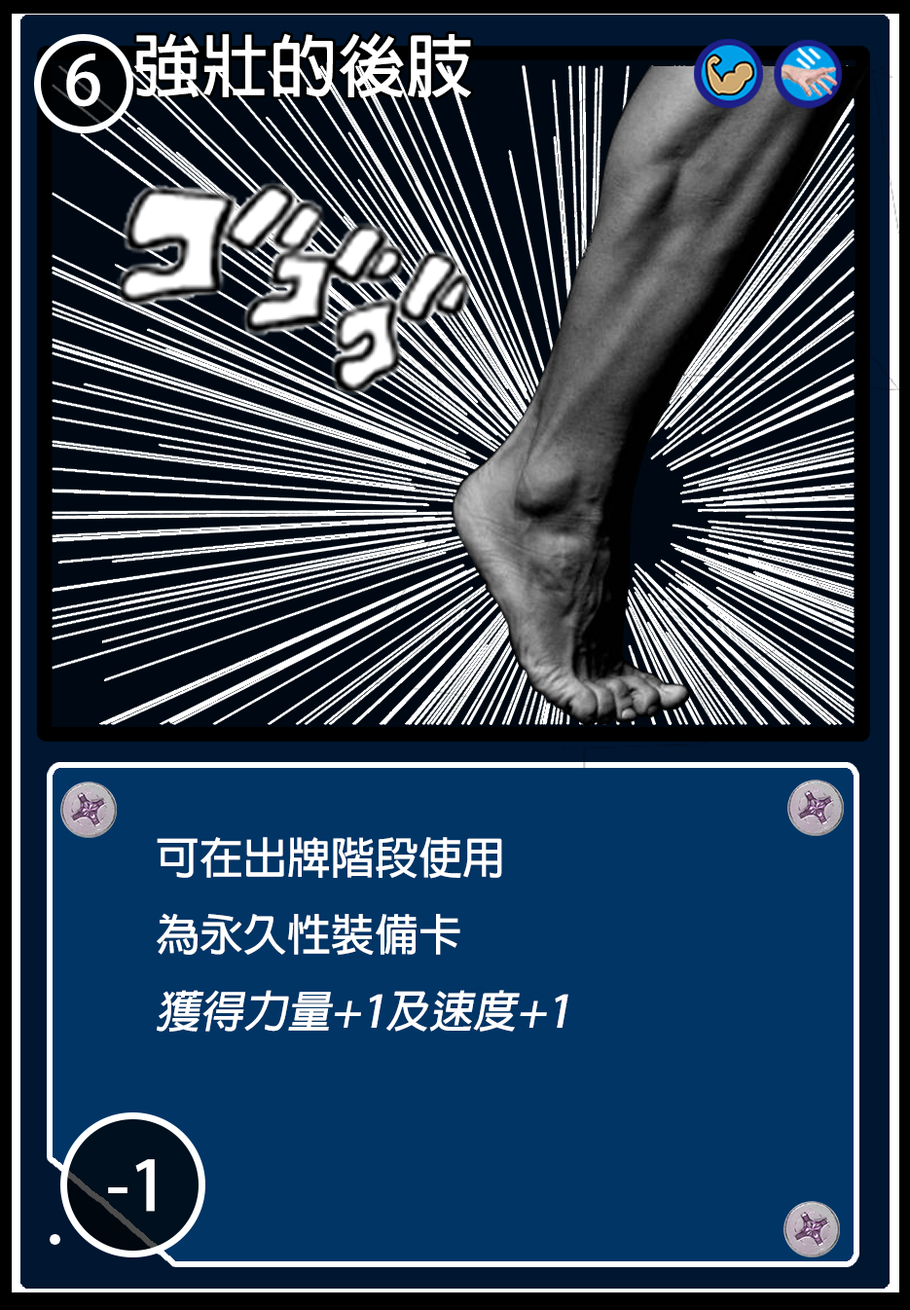
<style>
.page{position:relative;width:910px;height:1310px;background:#003566}
.page>*{position:absolute;margin:0}
.t1{font:68.1px "AdobeFanHeitiStd-Bold";color:#ffffff}
.t2{font:67.8px "AdobeFanHeitiStd-Bold";color:#ffffff}
.t3{font:43.8px "AdobeFanHeitiStd-Bold";color:#ffffff}
.t4{font:43.8px "AdobeFanHeitiStd-Bold";color:#ffffff;font-style:italic}
</style>
<div class="page">
<p class="t1" style="left:136px;top:33px;width:335px;height:65px">強壯的後肢</p>
<p class="t2" style="left:66px;top:54px;width:34px;height:53px">6</p>
<p class="t3" style="left:157px;top:837px;width:411px;height:195px">可在出牌階段使用<br>為永久性裝備卡<br><span class="t4">獲得力量+1及速度+1</span></p>
<p class="t1" style="left:108px;top:1159px;width:47px;height:53px">-1</p>
</div>
